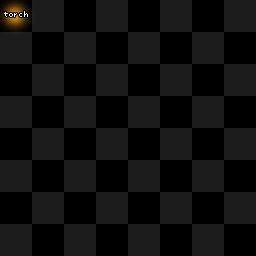
<style>
.page{position:relative;width:256px;height:256px;background:#1c1c1c}
.page>*{position:absolute;margin:0}
.t1{font:8px "LucidaConsole";color:#ffffff}
</style>
<div class="page">
<p class="t1" style="left:4px;top:11px;width:24px;height:6px">torch</p>
</div>
